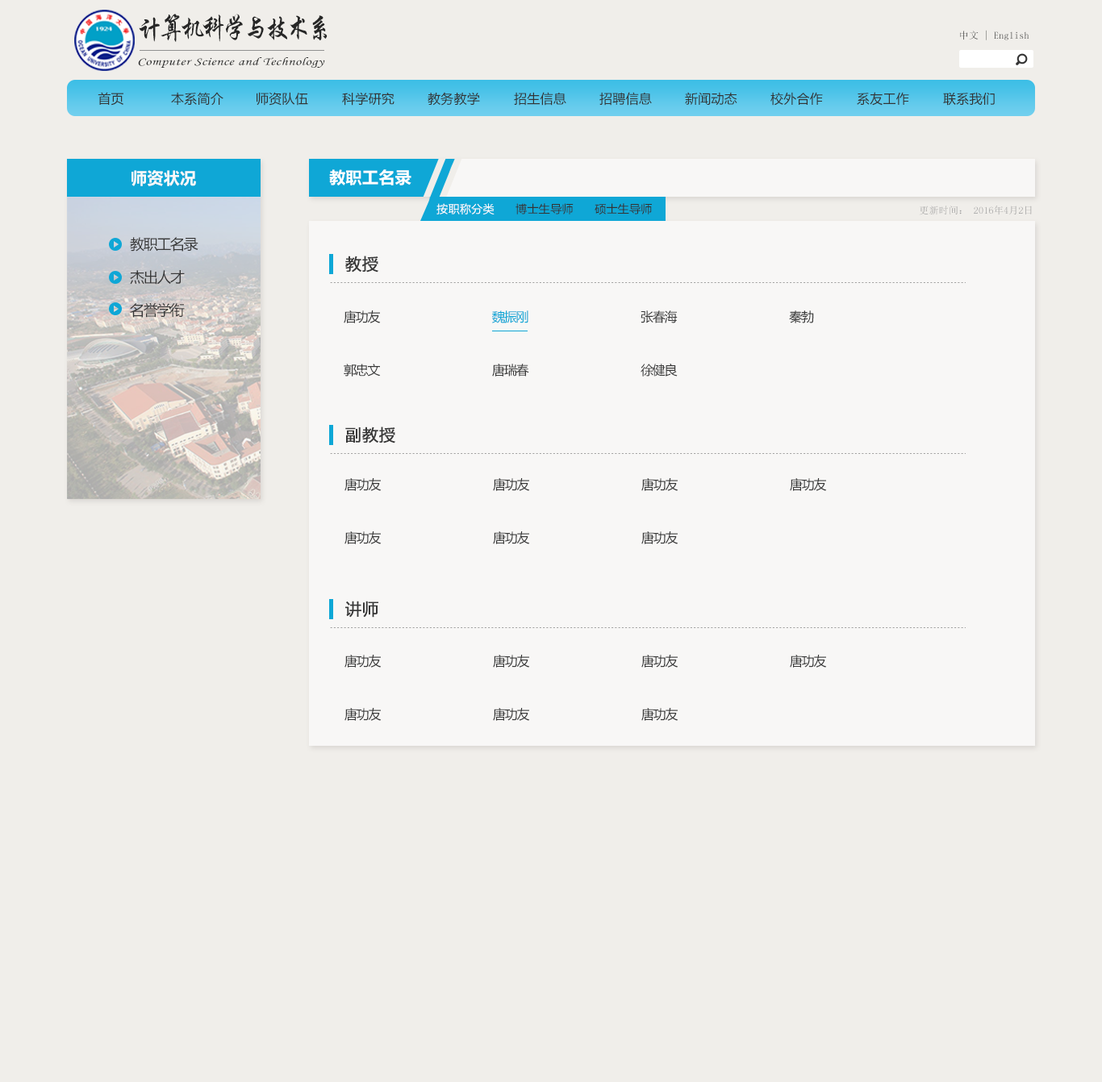
<style>
.page{position:relative;width:1102px;height:1082px;background:#f0eeea}
.page>*{position:absolute;margin:0}
.t1{font:28.1px "STXingkai";letter-spacing:-0.14em;color:#272727;scale:0.88 1}
.t2{font:9.7px "SimSun";letter-spacing:0.02em}
.t3{font:11.1px "STLiti";letter-spacing:0.02em;color:#272727;scale:1.34 1}
.t4{font:12.9px "MicrosoftYaHei";letter-spacing:0.02em;color:#333333}
.t5{font:16.1px "MicrosoftYaHei-Bold";letter-spacing:0.02em;color:#f9f9f9}
.t6{font:16.1px "MicrosoftYaHei-Bold";letter-spacing:0.02em;color:#ffffff}
.t7{font:11.3px "MicrosoftYaHei";letter-spacing:0.02em;color:#333333}
.t8{font:11.3px "MicrosoftYaHei";letter-spacing:0.02em;color:#ffffff}
.t9{font:9.7px "SimSun";letter-spacing:0.02em;color:#9c9c9c}
.t10{font:14.5px "MicrosoftYaHei";letter-spacing:-0.076em;color:#383838}
.t11{font:16.1px "MicrosoftYaHei";letter-spacing:0.02em;color:#383838;font-weight:bold}
.t12{font:12.9px "MicrosoftYaHei";letter-spacing:-0.076em;color:#383838}
.t13{font:12.9px "MicrosoftYaHei";letter-spacing:-0.076em;color:#0fa7d6}
</style>
<div class="page">
<p class="t1" style="left:139px;top:14px;width:188px;height:28px">计算机科学与技术系</p>
<p class="t2" style="left:960px;top:30px;width:69px;height:10px">中文 | English</p>
<p class="t3" style="left:138px;top:57px;width:187px;height:11px">Computer Science and Technology</p>
<p class="t4" style="left:98px;top:92px;width:25px;height:14px">首页</p>
<p class="t4" style="left:171px;top:92px;width:52px;height:14px">本系简介</p>
<p class="t4" style="left:256px;top:92px;width:52px;height:14px">师资队伍</p>
<p class="t4" style="left:342px;top:92px;width:52px;height:14px">科学研究</p>
<p class="t4" style="left:427px;top:92px;width:53px;height:14px">教务教学</p>
<p class="t4" style="left:514px;top:92px;width:52px;height:14px">招生信息</p>
<p class="t4" style="left:599px;top:92px;width:53px;height:14px">招聘信息</p>
<p class="t4" style="left:685px;top:92px;width:52px;height:14px">新闻动态</p>
<p class="t4" style="left:770px;top:92px;width:53px;height:14px">校外合作</p>
<p class="t4" style="left:857px;top:92px;width:52px;height:14px">系友工作</p>
<p class="t4" style="left:943px;top:92px;width:51px;height:14px">联系我们</p>
<p class="t5" style="left:131px;top:170px;width:65px;height:16px">师资状况</p>
<p class="t6" style="left:329px;top:169px;width:82px;height:16px">教职工名录</p>
<p class="t7" style="left:436px;top:203px;width:216px;height:12px"><span class="t8">按职称分类      </span>博士生导师      硕士生导师</p>
<p class="t9" style="left:919px;top:206px;width:113px;height:9px">更新时间： 2016年4月2日</p>
<p class="t10" style="left:130px;top:237px;width:68px;height:15px">教职工名录</p>
<p class="t11" style="left:345px;top:256px;width:33px;height:17px">教授</p>
<p class="t10" style="left:130px;top:270px;width:55px;height:15px">杰出人才</p>
<p class="t10" style="left:130px;top:302px;width:55px;height:16px">名誉学衔</p>
<p class="t12" style="left:344px;top:311px;width:37px;height:12px">唐功友</p>
<p class="t13" style="left:492px;top:311px;width:36px;height:12px">魏振刚</p>
<p class="t12" style="left:640px;top:311px;width:37px;height:12px">张春海</p>
<p class="t12" style="left:789px;top:311px;width:25px;height:12px">秦勃</p>
<p class="t12" style="left:344px;top:364px;width:37px;height:13px">郭忠文</p>
<p class="t12" style="left:492px;top:364px;width:37px;height:13px">唐瑞春</p>
<p class="t12" style="left:640px;top:364px;width:37px;height:13px">徐健良</p>
<p class="t11" style="left:345px;top:427px;width:50px;height:17px">副教授</p>
<p class="t12" style="left:344px;top:478px;width:37px;height:13px">唐功友</p>
<p class="t12" style="left:493px;top:478px;width:37px;height:13px">唐功友</p>
<p class="t12" style="left:641px;top:478px;width:37px;height:13px">唐功友</p>
<p class="t12" style="left:790px;top:478px;width:37px;height:13px">唐功友</p>
<p class="t12" style="left:344px;top:531px;width:37px;height:13px">唐功友</p>
<p class="t12" style="left:493px;top:531px;width:37px;height:13px">唐功友</p>
<p class="t12" style="left:641px;top:531px;width:37px;height:13px">唐功友</p>
<p class="t11" style="left:345px;top:601px;width:33px;height:17px">讲师</p>
<p class="t12" style="left:344px;top:655px;width:37px;height:13px">唐功友</p>
<p class="t12" style="left:493px;top:655px;width:37px;height:13px">唐功友</p>
<p class="t12" style="left:641px;top:655px;width:37px;height:13px">唐功友</p>
<p class="t12" style="left:790px;top:655px;width:37px;height:13px">唐功友</p>
<p class="t12" style="left:344px;top:708px;width:37px;height:13px">唐功友</p>
<p class="t12" style="left:493px;top:708px;width:37px;height:13px">唐功友</p>
<p class="t12" style="left:641px;top:708px;width:37px;height:13px">唐功友</p>
</div>
